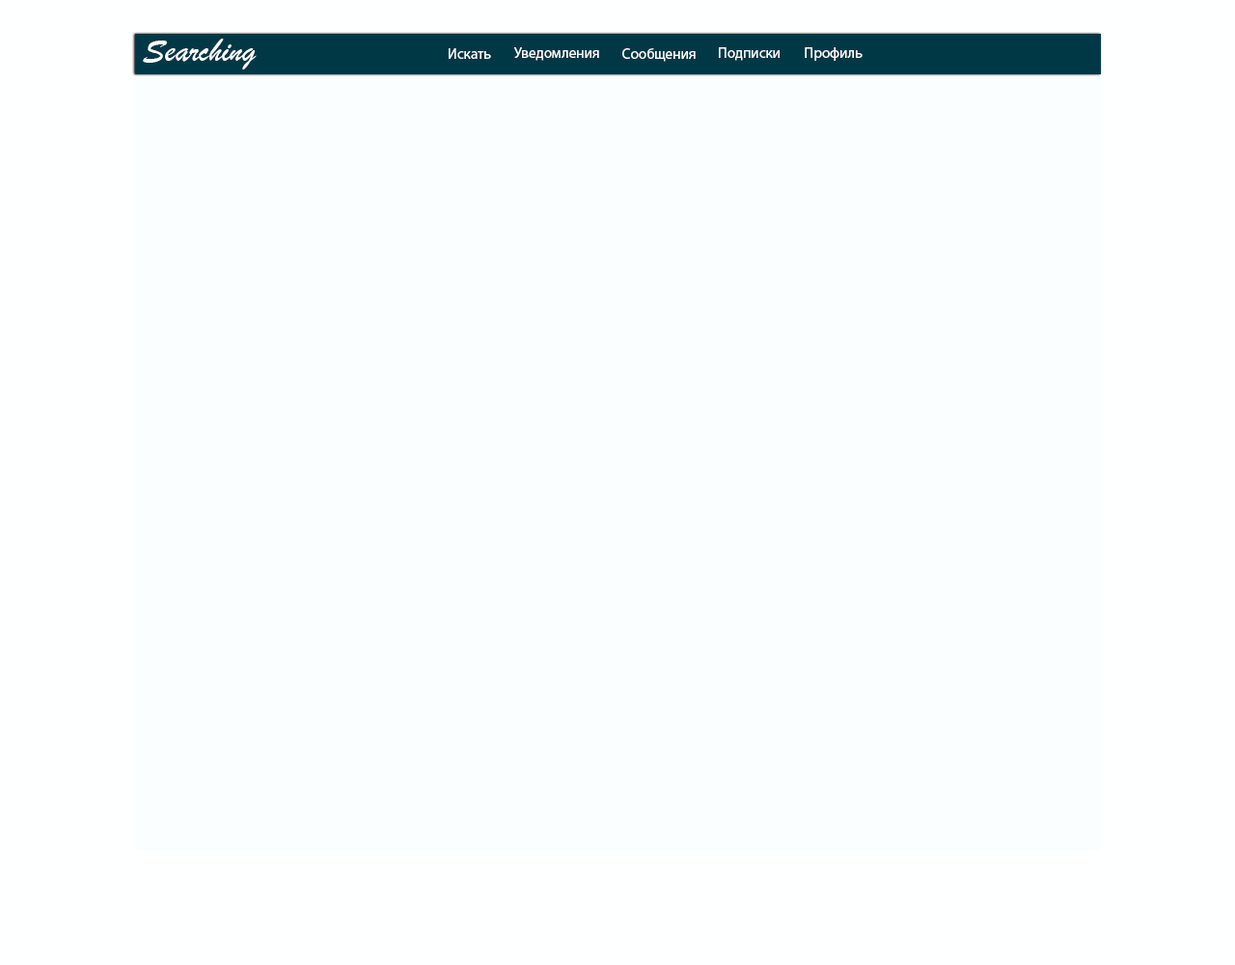
<style>
.page{position:relative;width:1235px;height:965px;background:#fafeff}
.page>*{position:absolute;margin:0}
.t1{font:34.3px "BrushScriptMT";color:#ffffff}
.t2{font:14.7px "MyriadPro-Regular";color:#ffffff}
</style>
<div class="page">
<p class="t1" style="left:143px;top:39px;width:114px;height:30px">Searching</p>
<p class="t2" style="left:449px;top:48px;width:42px;height:11px">Искать</p>
<p class="t2" style="left:513px;top:47px;width:86px;height:14px">Уведомления</p>
<p class="t2" style="left:623px;top:48px;width:73px;height:14px">Сообщения</p>
<p class="t2" style="left:719px;top:47px;width:61px;height:14px">Подписки</p>
<p class="t2" style="left:805px;top:47px;width:58px;height:14px">Профиль</p>
</div>
